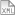
<style>
.page{position:relative;width:15px;height:15px}
.page>*{position:absolute;margin:0}
.t1{font:7px "AndaleMono";color:#8b8b8b;font-weight:bold}
</style>
<div class="page">
<p class="t1" style="left:2px;top:8px;width:13px;height:6px">XML</p>
</div>
